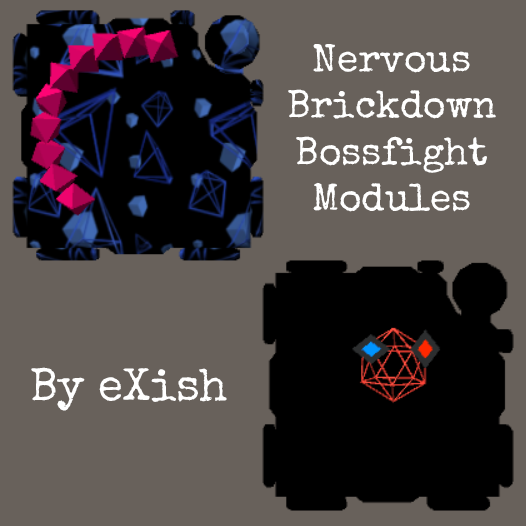
<style>
.page{position:relative;width:526px;height:526px;background:#68615b}
.page>*{position:absolute;margin:0}
.t1{font:38.8px "SpecialElite-Regular";color:#ffffff}
.t2{font:45.9px "SpecialElite-Regular";color:#ffffff}
</style>
<div class="page">
<p class="t1" style="left:288px;top:44px;width:208px;height:168px;text-align:center">Nervous<br>Brickdown<br>Bossfight<br>Modules</p>
<p class="t2" style="left:31px;top:367px;width:196px;height:44px">By eXish</p>
</div>
